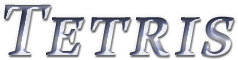
<style>
.page{position:relative;width:238px;height:60px;background:#ffffff}
.page>*{position:absolute;margin:0}
.t1{font:72px "Constantia";letter-spacing:0.025em;font-variant:small-caps;font-weight:bold;font-style:italic}
</style>
<div class="page">
<p class="t1" style="left:4px;top:4px;width:230px;height:52px">Tetris</p>
</div>
